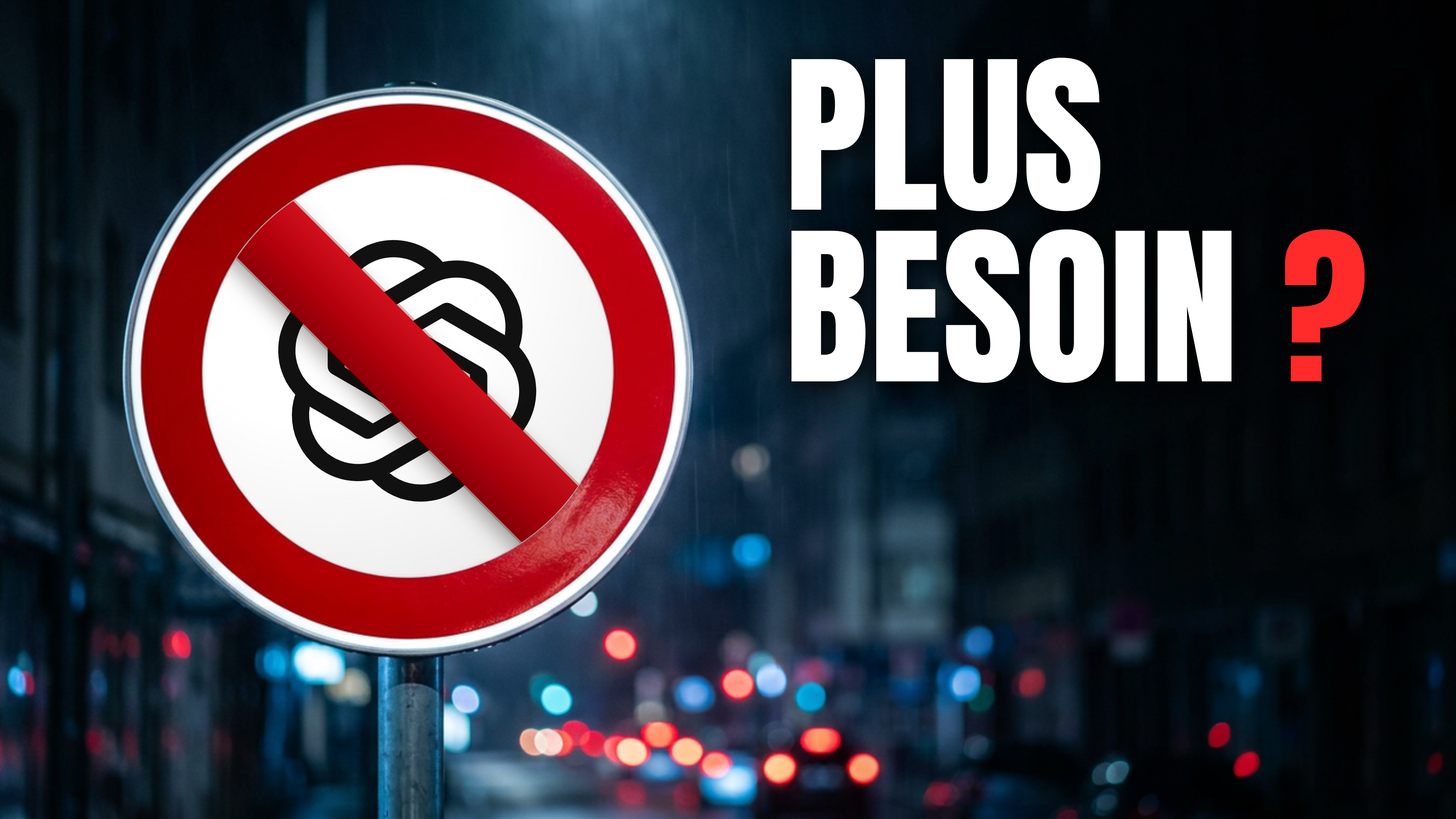
<style>
.page{position:relative;width:1456px;height:819px}
.page>*{position:absolute;margin:0}
.t1{font:175.2px/171.7px "Anton-Regular";letter-spacing:0.005em;color:#ffffff}
.t2{font:175.2px/171.7px "Anton-Regular";letter-spacing:0.005em;color:#ff2a2a}
</style>
<div class="page">
<p class="t1" style="left:791px;top:58px;width:574px;height:325px">PLUS<br>BESOIN <span class="t2">?</span></p>
</div>
